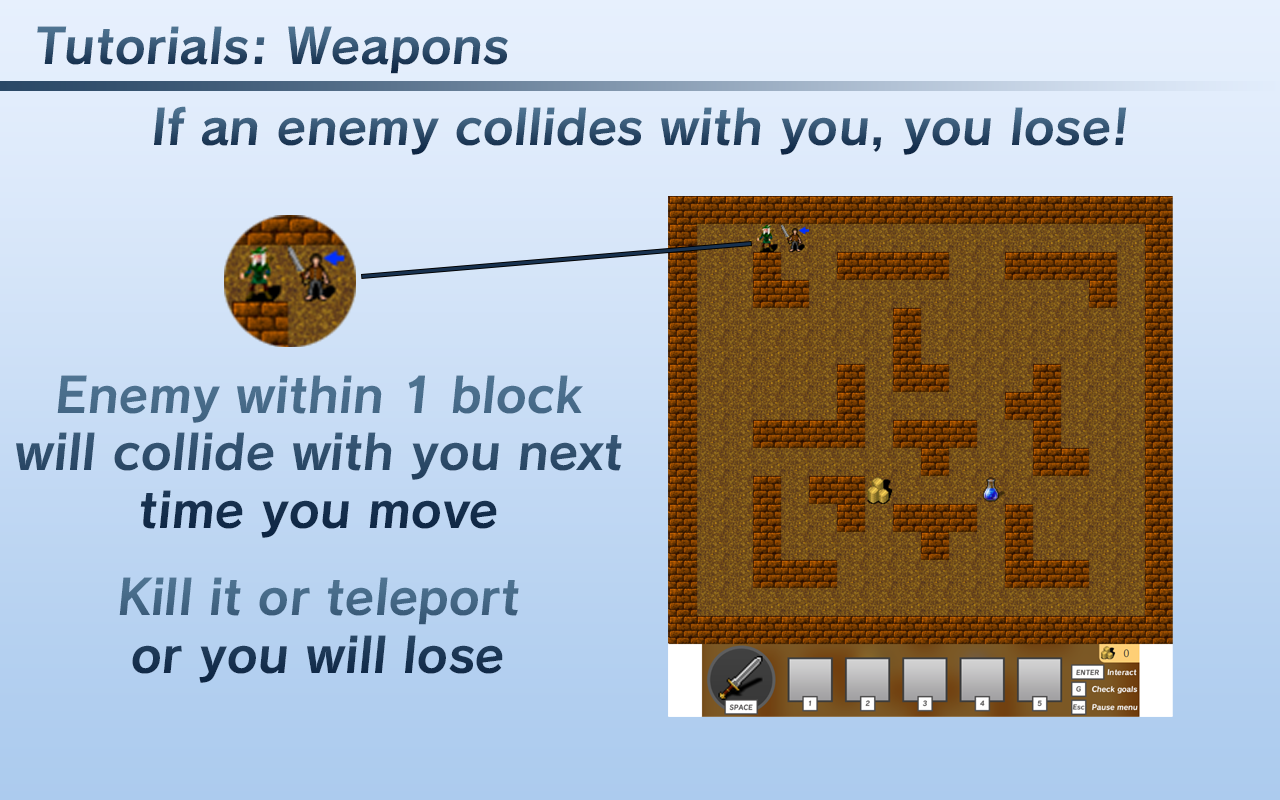
<style>
.page{position:relative;width:1280px;height:800px}
.page>*{position:absolute;margin:0}
.t1{font:48px "Calamity-Bold"}
.t2{font:48px "Calamity-Bold";color:#2f4e6c}
</style>
<div class="page">
<p class="t1" style="left:37px;top:26px;width:471px;height:48px">Tutorials: Weapons</p>
<p class="t2" style="left:154px;top:106px;width:973px;height:49px">If an enemy collides with you, you lose!</p>
<p class="t1" style="left:16px;top:375px;width:606px;height:163px;text-align:center">Enemy within 1 block<br>will collide with you next<br>time you move</p>
<p class="t1" style="left:119px;top:577px;width:400px;height:106px;text-align:center">Kill it or teleport<br>or you will lose</p>
</div>
